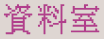
<style>
.page{position:relative;width:104px;height:39px;background:#ded6d2}
.page>*{position:absolute;margin:0}
.t1{font:30px "KH-Dot-kagurazaka-16";letter-spacing:0.14em;color:#c02f7a}
</style>
<div class="page">
<p class="t1" style="left:3px;top:4px;width:97px;height:31px">資料室</p>
</div>
